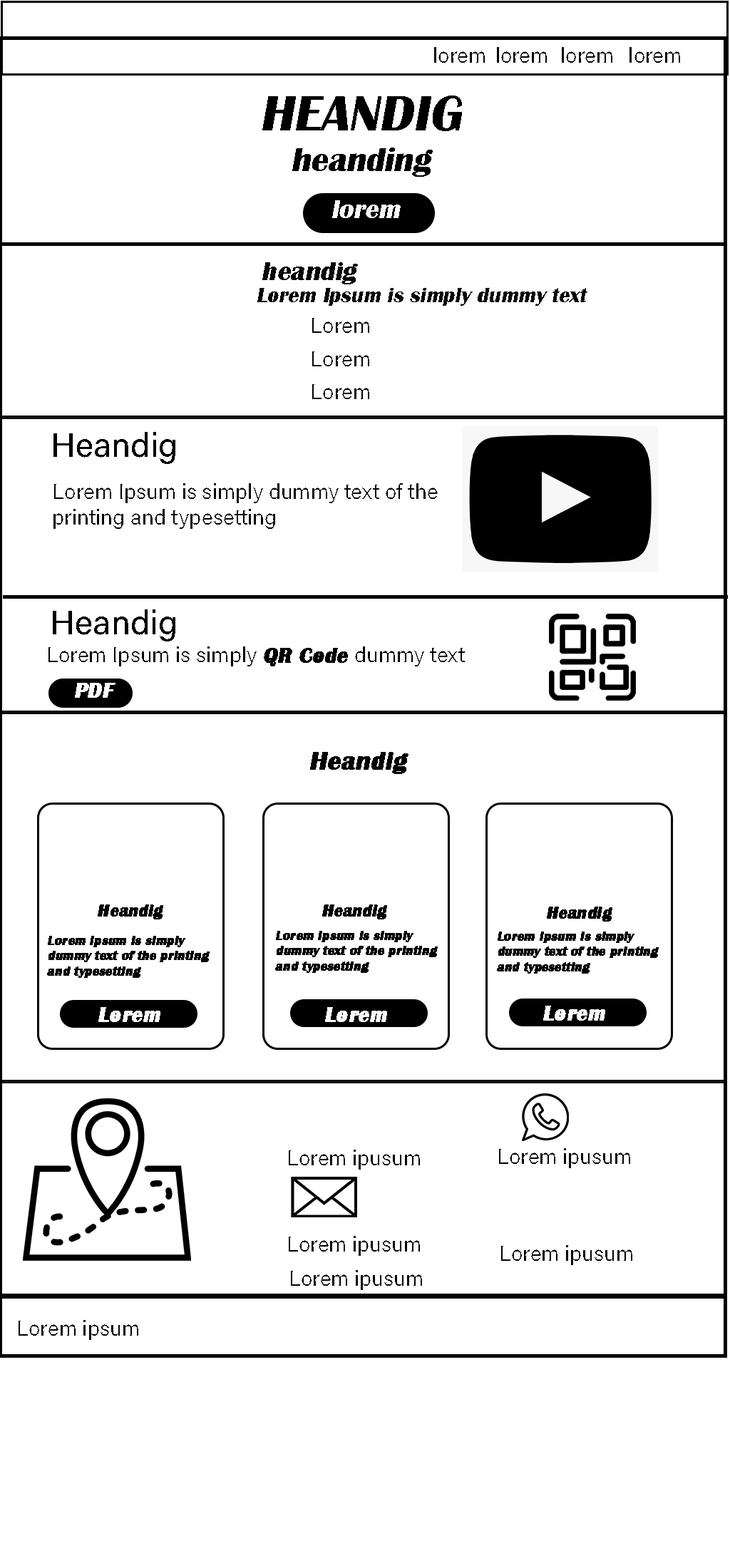
<style>
.page{position:relative;width:730px;height:1568px;background:#ffffff}
.page>*{position:absolute;margin:0}
.t1{font:21.4px "AcuminConcept-Regular";color:#000000;font-style:italic}
.t2{font:51.3px "BritannicBold";color:#000000;font-style:italic}
.t3{font:34.2px "BritannicBold";color:#000000;font-style:italic}
.t4{font:27.1px "BritannicBold";color:#fbf9f9;font-style:italic}
.t5{font:27.1px "BritannicBold";color:#060606;font-style:italic}
.t6{font:21.4px "BritannicBold";color:#060606;font-style:italic}
.t7{font:34.2px "AcuminConcept-Regular";color:#000000;font-style:italic}
.t8{font:21.4px "BritannicBold";color:#000000;font-weight:bold;font-style:italic}
.t9{font:21.4px "BritannicBold";color:#fefdfd;font-weight:bold;font-style:italic}
.t10{font:25.7px "BritannicBold";color:#030303;font-weight:bold;font-style:italic}
.t11{font:17.1px "BritannicBold";color:#030303;font-weight:bold;font-style:italic}
.t12{font:12.8px "BritannicBold";color:#030303;font-weight:bold;font-style:italic}
.t13{font:21.4px "BritannicBold";color:#fdfcfc;font-weight:bold;font-style:italic}
</style>
<div class="page">
<p class="t1" style="left:434px;top:47px;width:51px;height:16px">lorem</p>
<p class="t1" style="left:497px;top:47px;width:50px;height:16px">lorem</p>
<p class="t1" style="left:562px;top:47px;width:50px;height:16px">lorem</p>
<p class="t1" style="left:629px;top:47px;width:51px;height:16px">lorem</p>
<p class="t2" style="left:262px;top:96px;width:200px;height:35px">HEANDIG</p>
<p class="t3" style="left:292px;top:148px;width:141px;height:29px">heanding</p>
<p class="t4" style="left:332px;top:200px;width:69px;height:18px">lorem</p>
<p class="t5" style="left:262px;top:262px;width:96px;height:22px">heandig</p>
<p class="t6" style="left:257px;top:288px;width:330px;height:18px">Lorem Ipsum is simply dummy text</p>
<p class="t1" style="left:312px;top:318px;width:57px;height:15px">Lorem</p>
<p class="t1" style="left:312px;top:351px;width:57px;height:15px">Lorem</p>
<p class="t1" style="left:312px;top:384px;width:57px;height:15px">Lorem</p>
<p class="t7" style="left:53px;top:432px;width:122px;height:32px">Heandig</p>
<p class="t1" style="left:53px;top:483px;width:385px;height:46px">Lorem Ipsum is simply dummy text of the <br>printing and typesetting</p>
<p class="t7" style="left:53px;top:609px;width:122px;height:32px">Heandig</p>
<p class="t1" style="left:48px;top:646px;width:417px;height:20px">Lorem Ipsum is simply <span class="t8">QR Code </span>dummy text</p>
<p class="t9" style="left:75px;top:683px;width:40px;height:15px">PDF</p>
<p class="t10" style="left:310px;top:752px;width:98px;height:22px">Heandig</p>
<p class="t11" style="left:98px;top:904px;width:65px;height:15px">Heandig</p>
<p class="t11" style="left:322px;top:904px;width:65px;height:15px">Heandig</p>
<p class="t11" style="left:547px;top:907px;width:65px;height:15px">Heandig</p>
<p class="t12" style="left:47px;top:936px;width:163px;height:42px">Lorem Ipsum is simply <br>dummy text of the printing <br>and typesetting</p>
<p class="t12" style="left:275px;top:931px;width:163px;height:42px">Lorem Ipsum is simply <br>dummy text of the printing <br>and typesetting</p>
<p class="t12" style="left:497px;top:932px;width:162px;height:42px">Lorem Ipsum is simply <br>dummy text of the printing <br>and typesetting</p>
<p class="t13" style="left:98px;top:1007px;width:62px;height:15px">Lorem</p>
<p class="t13" style="left:325px;top:1007px;width:62px;height:15px">Lorem</p>
<p class="t13" style="left:543px;top:1006px;width:62px;height:15px">Lorem</p>
<p class="t1" style="left:289px;top:1150px;width:131px;height:20px">Lorem ipusum</p>
<p class="t1" style="left:499px;top:1148px;width:131px;height:20px">Lorem ipusum</p>
<p class="t1" style="left:289px;top:1236px;width:131px;height:20px">Lorem ipusum</p>
<p class="t1" style="left:501px;top:1245px;width:131px;height:20px">Lorem ipusum</p>
<p class="t1" style="left:291px;top:1270px;width:131px;height:20px">Lorem ipusum</p>
<p class="t1" style="left:19px;top:1320px;width:119px;height:20px">Lorem ipsum</p>
</div>
